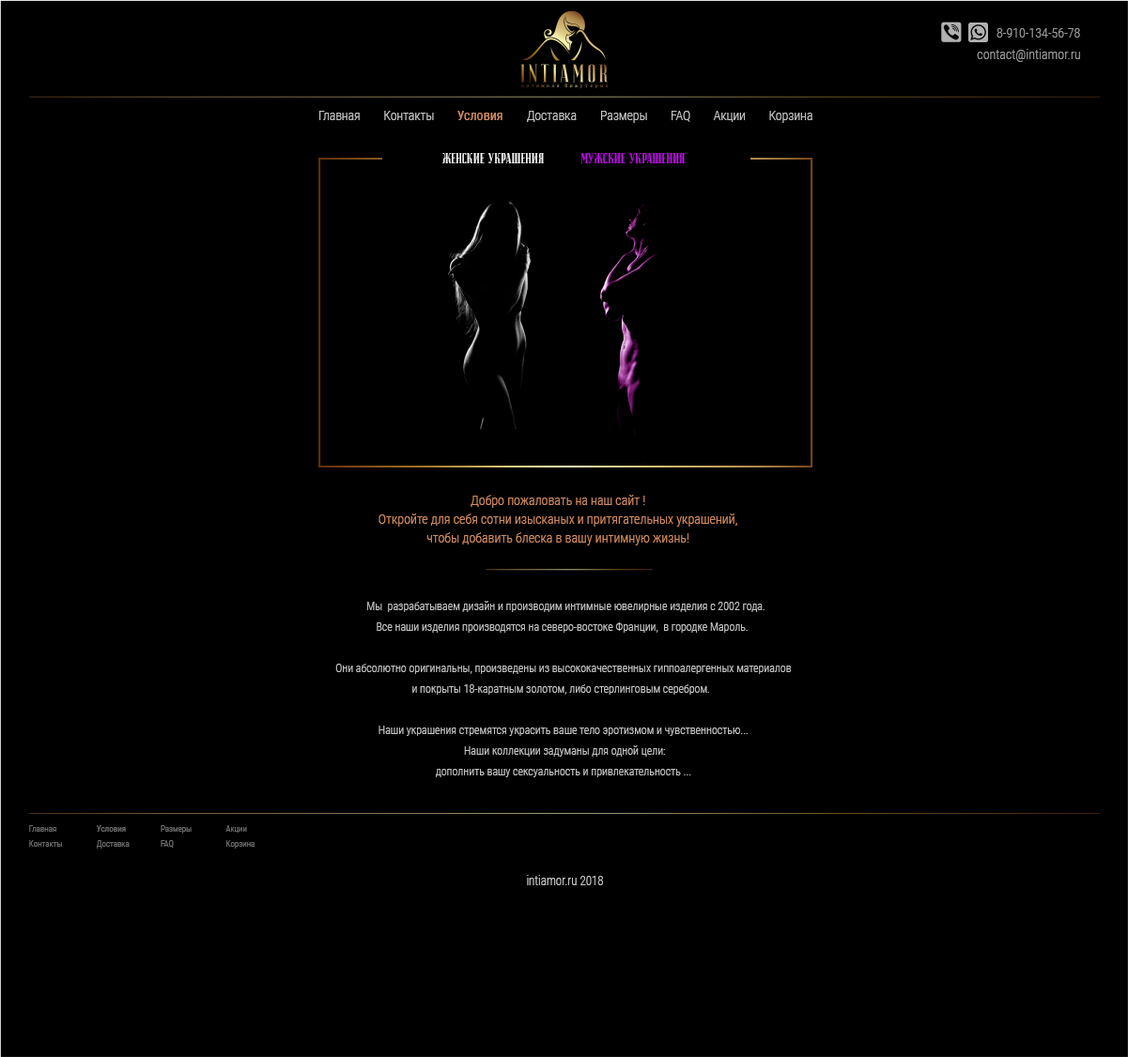
<style>
.page{position:relative;width:1128px;height:1057px;background:#000000}
.page>*{position:absolute;margin:0}
.t1{font:13.1px "RobotoCondensed-Light";color:#9c9b9b}
.t2{font:12.9px "RobotoCondensed-Light";color:#c6c6c5}
.t3{font:13.1px "RobotoCondensed-Regular";color:#d38d5e}
.t4{font:15px "JOURNALISM";color:#f5f5f5}
.t5{font:15px "JOURNALISM";color:#bf0cea}
.t6{font:13.1px/18.8px "RobotoCondensed-Light";color:#d38d5e}
.t7{font:11.3px/20.7px "RobotoCondensed-Light";color:#c6c6c5}
.t8{font:8.5px/15px "RobotoCondensed-Light";color:#6f6f6e}
.t9{font:8.5px/15px "RobotoCondensed-Regular";color:#6f6f6e}
.t10{font:13.1px "RobotoCondensed-Light";color:#c6c6c5;scale:0.92 1}
</style>
<div class="page">
<p class="t1" style="left:996px;top:28px;width:84px;height:10px">8-910-134-56-78</p>
<p class="t1" style="left:977px;top:49px;width:103px;height:13px">contact@intiamor.ru</p>
<p class="t2" style="left:319px;top:111px;width:493px;height:12px">Главная        Контакты        <span class="t3">Условия        </span>Доставка        Размеры        FAQ        Акции        Корзина</p>
<p class="t4" style="left:442px;top:153px;width:243px;height:10px">Женские украшения          <span class="t5">Мужские украшения</span></p>
<p class="t6" style="left:378px;top:495px;width:359px;height:51px;text-align:center">Добро пожаловать на наш сайт !<br>Откройте для себя сотни изысканых и притягательных украшений, <br>чтобы добавить блеска в вашу интимную жизнь!</p>
<p class="t7" style="left:335px;top:601px;width:457px;height:177px;text-align:center">Мы  разрабатываем дизайн и производим интимные ювелирные изделия с 2002 года.<br>Все наши изделия производятся на северо-востоке Франции,  в городке Мароль. <br><br> Они абсолютно оригинальны, произведены из высококачественных гиппоалергенных материалов <br>и покрыты 18-каратным золотом, либо стерлинговым серебром.  <br><br>Наши украшения стремятся украсить ваше тело эротизмом и чувственностью...<br>  Наши коллекции задуманы для одной цели: <br>дополнить вашу сексуальность и привлекательность ...</p>
<p class="t8" style="left:29px;top:825px;width:33px;height:22px">Главная        <br>Контакты</p>
<p class="t8" style="left:97px;top:825px;width:33px;height:24px"><span class="t9">Условия        <br></span>Доставка</p>
<p class="t8" style="left:161px;top:825px;width:31px;height:23px">Размеры        <br>FAQ</p>
<p class="t8" style="left:225px;top:825px;width:29px;height:24px">Акции        <br>Корзина</p>
<p class="t10" style="left:527px;top:875px;width:76px;height:10px">intiamor.ru 2018</p>
</div>
